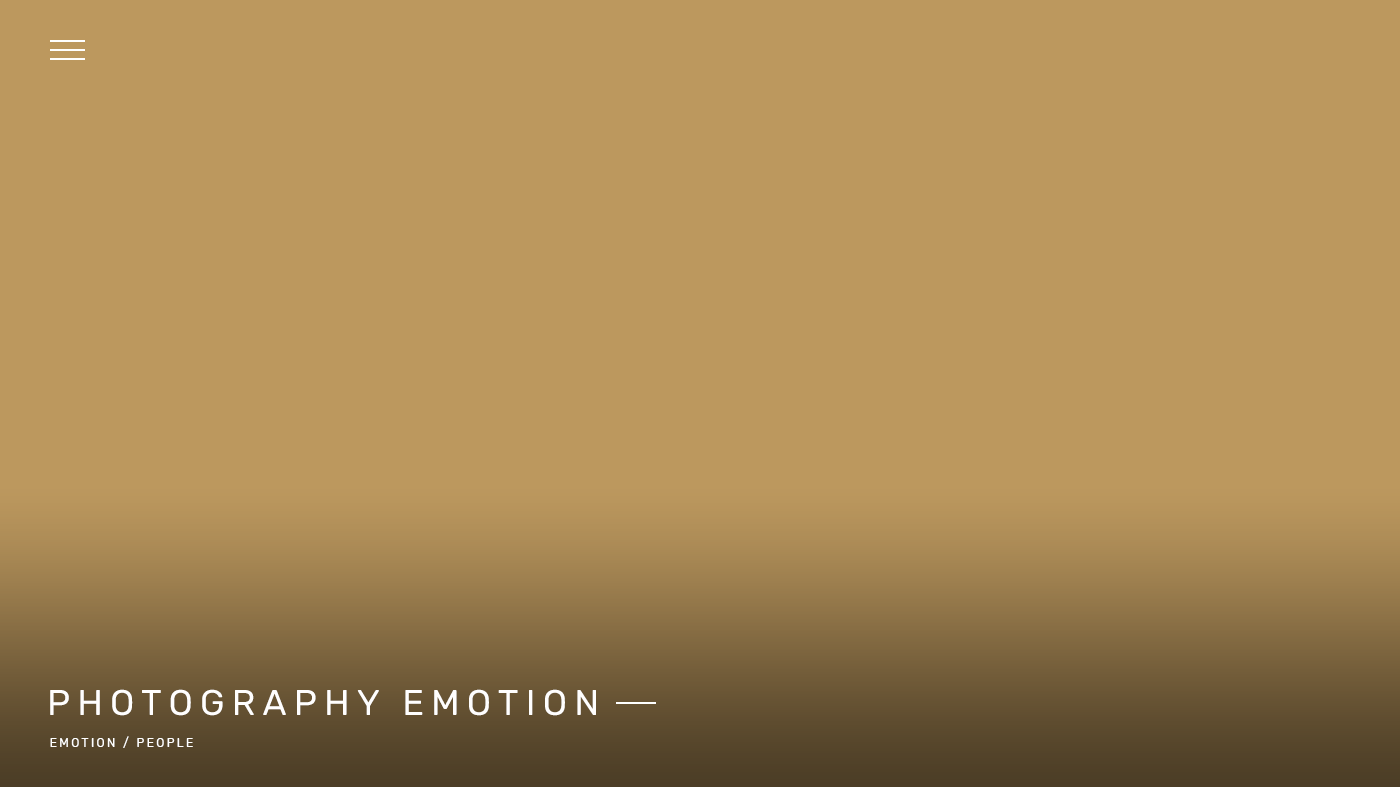
<style>
.page{position:relative;width:1400px;height:787px;background:#bc985e}
.page>*{position:absolute;margin:0}
.t1{font:36px "Rubik-Regular";letter-spacing:0.2em;color:#fffefe;text-transform:uppercase}
.t2{font:12px "Rubik-Regular";letter-spacing:0.2em;color:#ffffff;text-transform:uppercase}
</style>
<div class="page">
<p class="t1" style="left:50px;top:689px;width:546px;height:27px">Photography Emotion</p>
<p class="t2" style="left:50px;top:736px;width:143px;height:12px">Emotion / People</p>
</div>
